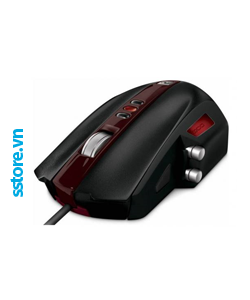
<style>
.page{position:relative;width:250px;height:300px;background:#ffffff}
.page>*{position:absolute;margin:0}
.t1{font:20px "MyriadPro-Bold";letter-spacing:-0.05em;color:#00aae2;scale:0.95 1}
</style>
<div class="page">
<p class="t1" style="left:10px;top:129px;width:13px;height:68px;rotate:-90deg">sstore.vn</p>
</div>
